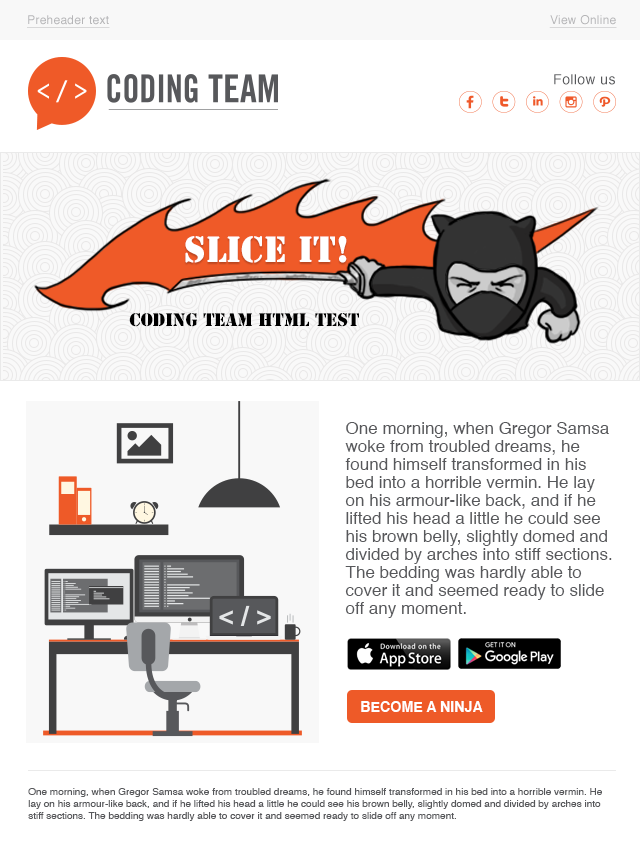
<style>
.page{position:relative;width:640px;height:853px;background:#ffffff}
.page>*{position:absolute;margin:0}
.t1{font:12px "Helvetica";letter-spacing:0.02em;color:#b5b5b7;text-decoration:underline}
.t2{font:14px "Helvetica";letter-spacing:0.02em;color:#57585b}
.t3{font:34.2px "StencilStd";color:#ffffff;text-transform:uppercase}
.t4{font:17.1px "StencilStd";color:#000000;text-transform:uppercase}
.t5{font:17px/18px "Helvetica";color:#57585b}
.t6{font:14.3px "Helvetica-Bold";color:#ffffff}
.t7{font:10px "Helvetica";color:#57585b}
</style>
<div class="page">
<p class="t1" style="left:27px;top:15px;width:83px;height:13px">Preheader text</p>
<p class="t1" style="left:549px;top:15px;width:68px;height:13px">View Online</p>
<p class="t2" style="left:554px;top:74px;width:61px;height:11px">Follow us</p>
<p class="t3" style="left:185px;top:236px;width:162px;height:27px">slice it!</p>
<p class="t4" style="left:129px;top:313px;width:230px;height:14px">coding team HTML test</p>
<p class="t5" style="left:345px;top:422px;width:267px;height:196px">One morning, when Gregor Samsa woke from troubled dreams, he found himself transformed in his bed into a horrible vermin. He lay on his armour-like back, and if he lifted his head a little he could see his brown belly, slightly domed and divided by arches into stiff sections. The bedding was hardly able to cover it and seemed ready to slide off any moment.</p>
<p class="t6" style="left:361px;top:701px;width:122px;height:11px">BECOME A NINJA</p>
<p class="t7" style="left:28px;top:788px;width:574px;height:33px">One morning, when Gregor Samsa woke from troubled dreams, he found himself transformed in his bed into a horrible vermin. He lay on his armour-like back, and if he lifted his head a little he could see his brown belly, slightly domed and divided by arches into stiff sections. The bedding was hardly able to cover it and seemed ready to slide off any moment.</p>
</div>
